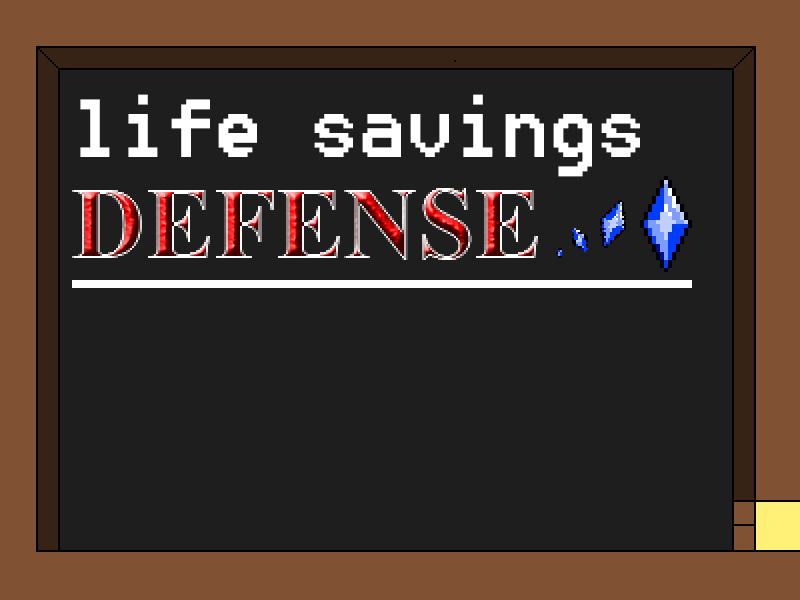
<style>
.page{position:relative;width:800px;height:600px;background:#1e1e1e}
.page>*{position:absolute;margin:0}
.t1{font:102px "8514oem";color:#ffffff}
</style>
<div class="page">
<p class="t1" style="left:80px;top:94px;width:560px;height:83px">life savings</p>
</div>
